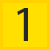
<style>
.page{position:relative;width:50px;height:50px;background:#ffe000}
.page>*{position:absolute;margin:0}
.t1{font:12px "MyriadPro-Regular";color:#282828}
</style>
<div class="page">
<p class="t1" style="left:17px;top:8px;width:11px;height:33px;text-align:center">1</p>
</div>
